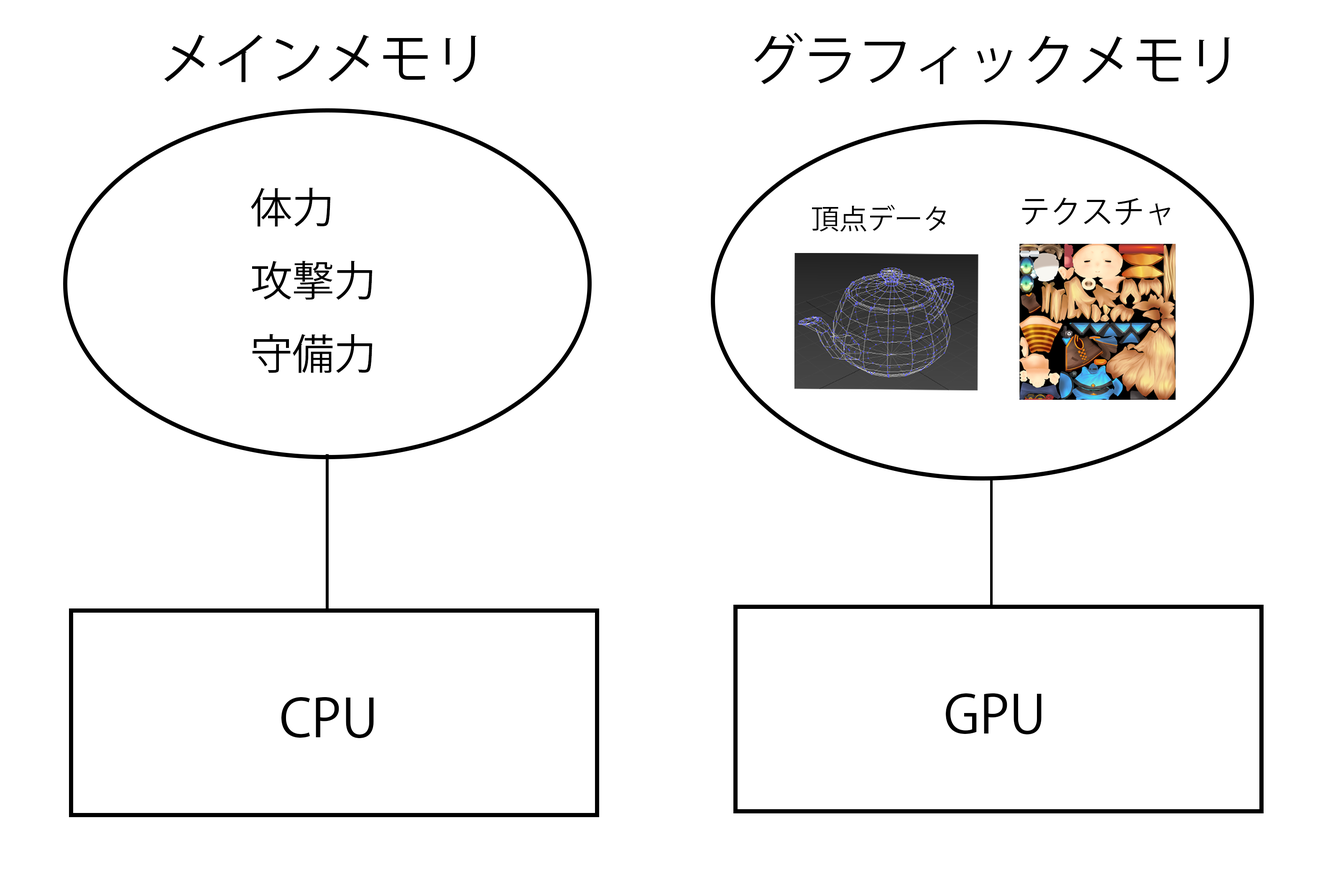
<style>
.page{position:relative;width:1338px;height:892px;background:#ffffff}
.page>*{position:absolute;margin:0}
.t1{font:54.8px "KozGoPr6N-Regular";color:#000000}
.t2{font:41.8px "KozGoPr6N-Regular";color:#000000}
.t3{font:31.3px "KozGoPr6N-Regular";color:#000000}
.t4{font:27.9px "KozGoPr6N-Regular";color:#000000}
.t5{font:52.2px "KozGoPr6N-Regular";color:#000000}
</style>
<div class="page">
<p class="t1" style="left:164px;top:34px;width:312px;height:48px">メインメモリ</p>
<p class="t1" style="left:754px;top:32px;width:476px;height:52px">グラフィックメモリ</p>
<p class="t2" style="left:251px;top:187px;width:121px;height:186px">体力<br>攻撃力<br>守備力</p>
<p class="t3" style="left:1022px;top:197px;width:148px;height:28px">ﾃクスチャ</p>
<p class="t4" style="left:812px;top:204px;width:134px;height:28px">頂点データ</p>
<p class="t5" style="left:281px;top:696px;width:93px;height:42px">CPU</p>
<p class="t5" style="left:945px;top:693px;width:96px;height:41px">GPU</p>
</div>
